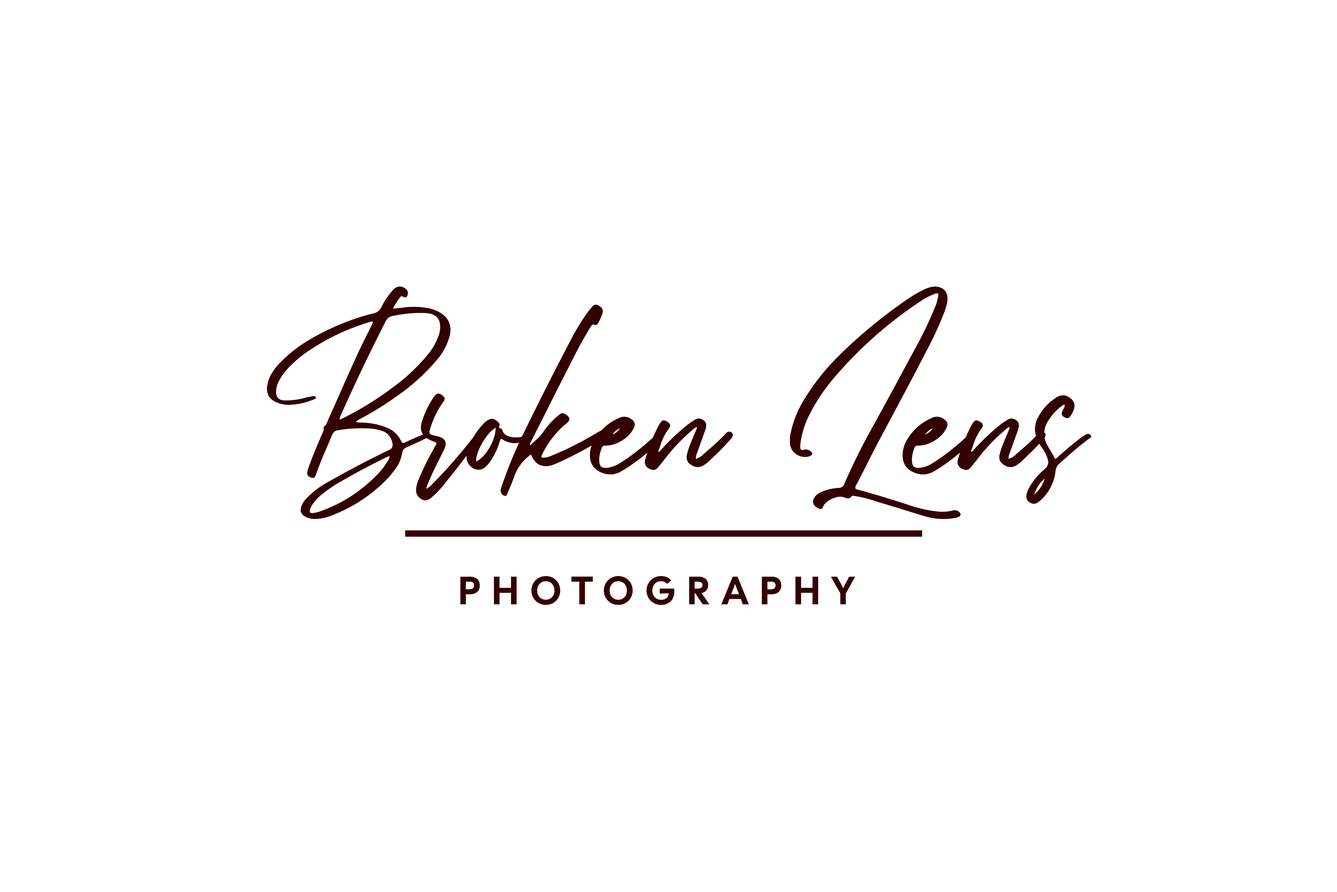
<style>
.page{position:relative;width:1337px;height:892px;background:#ffffff}
.page>*{position:absolute;margin:0}
.t1{font:268.4px "Bellarinde";color:#330000}
.t2{font:39.6px "CalSans-SemiBold";letter-spacing:0.3em;color:#330000;text-transform:uppercase}
</style>
<div class="page">
<p class="t1" style="left:267px;top:286px;width:825px;height:233px">Broken Lens</p>
<p class="t2" style="left:460px;top:576px;width:396px;height:29px">Photography</p>
</div>
